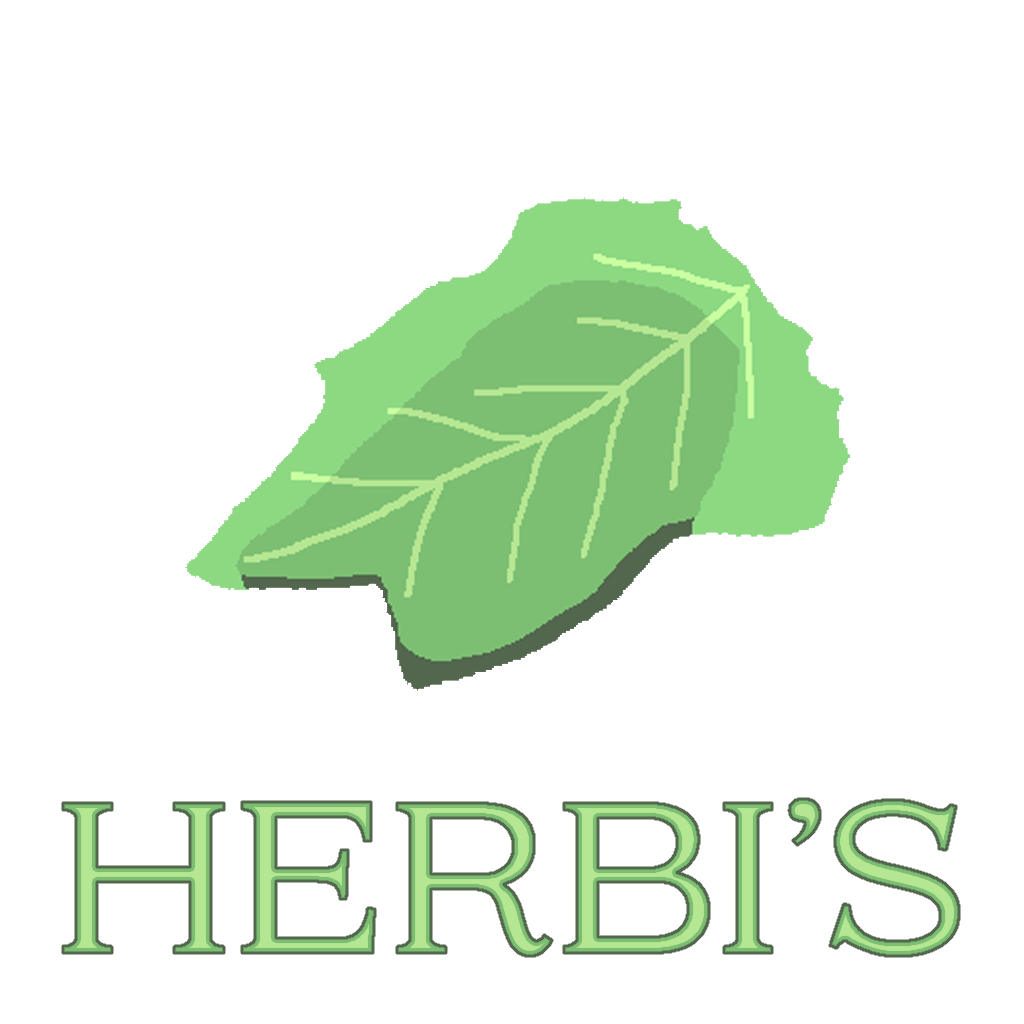
<style>
.page{position:relative;width:1024px;height:1024px;background:#ffffff}
.page>*{position:absolute;margin:0}
.t1{font:208.3px "Kelvingrove-Regular";letter-spacing:0.02em}
</style>
<div class="page">
<p class="t1" style="left:63px;top:799px;width:896px;height:157px">HERBI’S</p>
</div>
